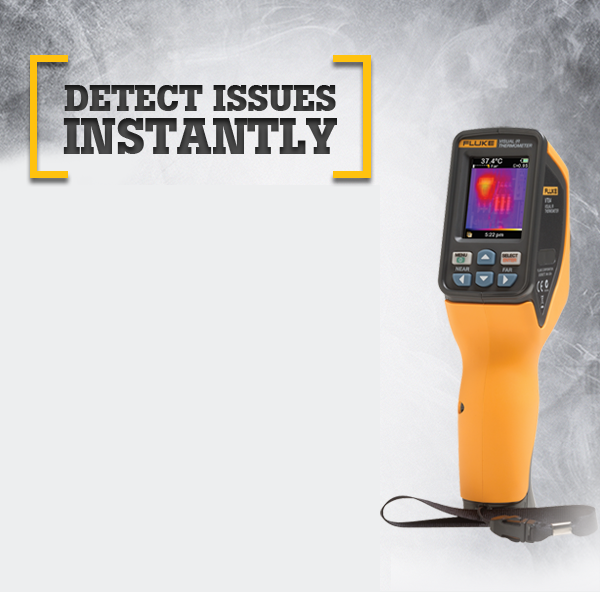
<style>
.page{position:relative;width:600px;height:592px;background:#edeeef}
.page>*{position:absolute;margin:0}
.t1{font:37px/37px "BotonBold";letter-spacing:-0.01em;color:#3c3c3c;text-transform:uppercase}
.t2{font:50px/38px "BotonBold";color:#3c3c3c;text-transform:uppercase}
</style>
<div class="page">
<p class="t1" style="left:63px;top:85px;width:274px;height:69px;text-align:justify">detect issues<br><span class="t2">instantly</span></p>
</div>
